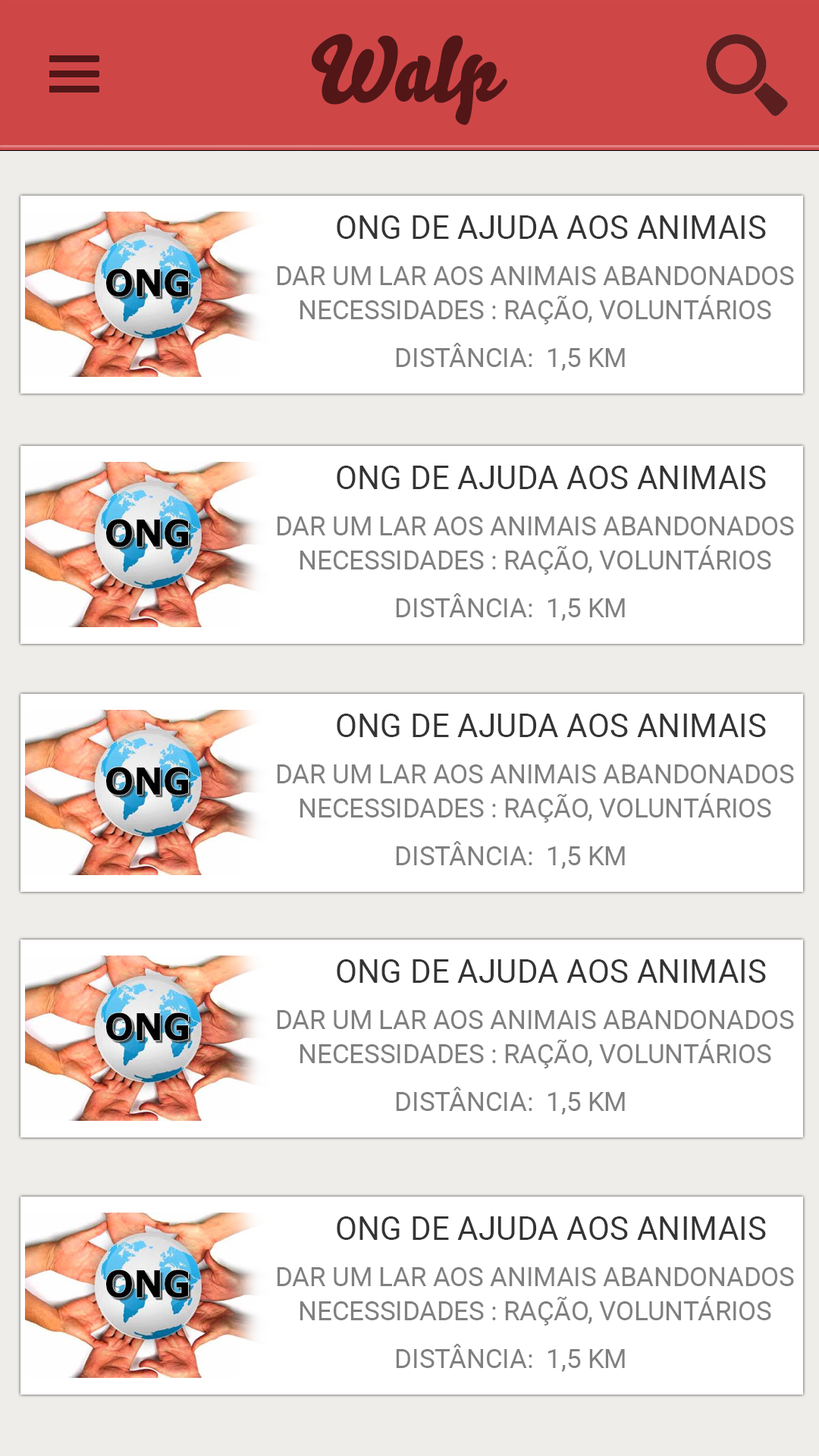
<style>
.page{position:relative;width:819px;height:1456px;background:#ffffff}
.page>*{position:absolute;margin:0}
.t1{font:90.5px "Bello-Pro";color:#521617}
.t2{font:32.3px "Roboto-Regular";color:#343434}
.t3{font:26.2px "Roboto-Regular";color:#808080}
.t4{font:26.3px "Roboto-Regular";color:#808080}
</style>
<div class="page">
<p class="t1" style="left:311px;top:33px;width:196px;height:92px">Walp</p>
<p class="t2" style="left:337px;top:215px;width:429px;height:24px">ONG DE AJUDA AOS ANIMAIS</p>
<p class="t3" style="left:277px;top:266px;width:517px;height:19px">DAR UM LAR AOS ANIMAIS ABANDONADOS</p>
<p class="t3" style="left:300px;top:295px;width:471px;height:30px">NECESSIDADES : RAÇÃO, VOLUNTÁRIOS</p>
<p class="t4" style="left:396px;top:343px;width:229px;height:28px">DISTÂNCIA:  1,5 KM</p>
<p class="t2" style="left:337px;top:466px;width:429px;height:23px">ONG DE AJUDA AOS ANIMAIS</p>
<p class="t3" style="left:277px;top:516px;width:517px;height:19px">DAR UM LAR AOS ANIMAIS ABANDONADOS</p>
<p class="t3" style="left:300px;top:545px;width:471px;height:30px">NECESSIDADES : RAÇÃO, VOLUNTÁRIOS</p>
<p class="t4" style="left:396px;top:593px;width:229px;height:28px">DISTÂNCIA:  1,5 KM</p>
<p class="t2" style="left:337px;top:714px;width:429px;height:23px">ONG DE AJUDA AOS ANIMAIS</p>
<p class="t3" style="left:277px;top:764px;width:517px;height:19px">DAR UM LAR AOS ANIMAIS ABANDONADOS</p>
<p class="t3" style="left:300px;top:793px;width:471px;height:30px">NECESSIDADES : RAÇÃO, VOLUNTÁRIOS</p>
<p class="t4" style="left:396px;top:841px;width:229px;height:28px">DISTÂNCIA:  1,5 KM</p>
<p class="t2" style="left:337px;top:959px;width:429px;height:24px">ONG DE AJUDA AOS ANIMAIS</p>
<p class="t3" style="left:277px;top:1010px;width:517px;height:19px">DAR UM LAR AOS ANIMAIS ABANDONADOS</p>
<p class="t3" style="left:300px;top:1039px;width:471px;height:29px">NECESSIDADES : RAÇÃO, VOLUNTÁRIOS</p>
<p class="t4" style="left:396px;top:1087px;width:229px;height:28px">DISTÂNCIA:  1,5 KM</p>
<p class="t2" style="left:337px;top:1216px;width:429px;height:24px">ONG DE AJUDA AOS ANIMAIS</p>
<p class="t3" style="left:277px;top:1267px;width:517px;height:19px">DAR UM LAR AOS ANIMAIS ABANDONADOS</p>
<p class="t3" style="left:300px;top:1296px;width:471px;height:30px">NECESSIDADES : RAÇÃO, VOLUNTÁRIOS</p>
<p class="t4" style="left:396px;top:1344px;width:229px;height:28px">DISTÂNCIA:  1,5 KM</p>
</div>
